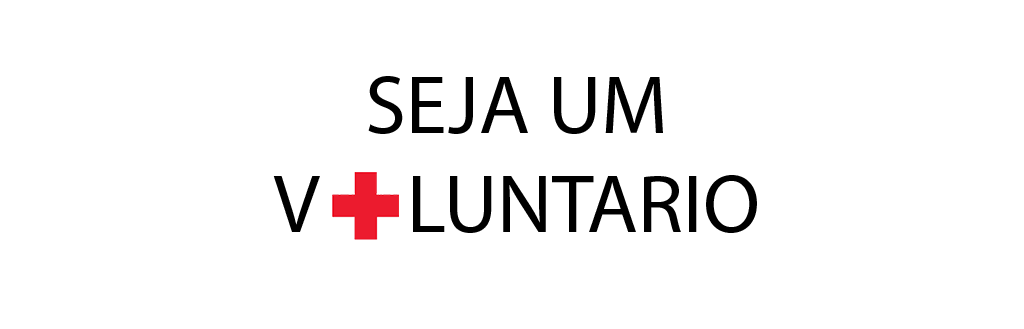
<style>
.page{position:relative;width:1024px;height:329px;background:#ffffff}
.page>*{position:absolute;margin:0}
.t1{font:83.2px "MyriadPro-Regular";color:#000000}
</style>
<div class="page">
<p class="t1" style="left:273px;top:76px;width:484px;height:157px;text-align:center">SEJA UM<br>V     LUNTARIO</p>
</div>
